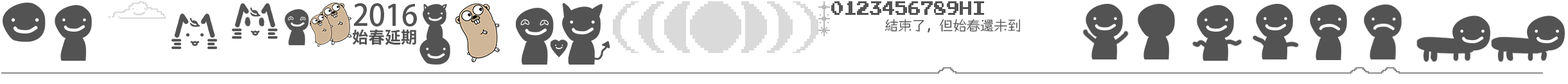
<style>
.page{position:relative;width:1568px;height:84px;background:#ffffff}
.page>*{position:absolute;margin:0}
.t1{font:29px "AdobeFanHeitiStd-Bold";color:#535353}
.t2{font:16.3px "NotoSansCJKtc-Bold";color:#535353}
.t3{font:13.7px "FZZhiYi-DGBT";color:#535353}
</style>
<div class="page">
<p class="t1" style="left:354px;top:3px;width:63px;height:23px">2016</p>
<p class="t2" style="left:352px;top:29px;width:64px;height:16px">始春延期</p>
<p class="t3" style="left:885px;top:19px;width:135px;height:14px">結束了，但始春還未到</p>
</div>
